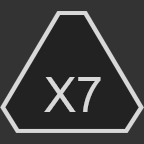
<style>
.page{position:relative;width:144px;height:144px;background:#333333}
.page>*{position:absolute;margin:0}
.t1{font:48px "ArialMT";color:#d8d8d8;font-variant:small-caps}
</style>
<div class="page">
<p class="t1" style="left:44px;top:77px;width:57px;height:35px">X7</p>
</div>
